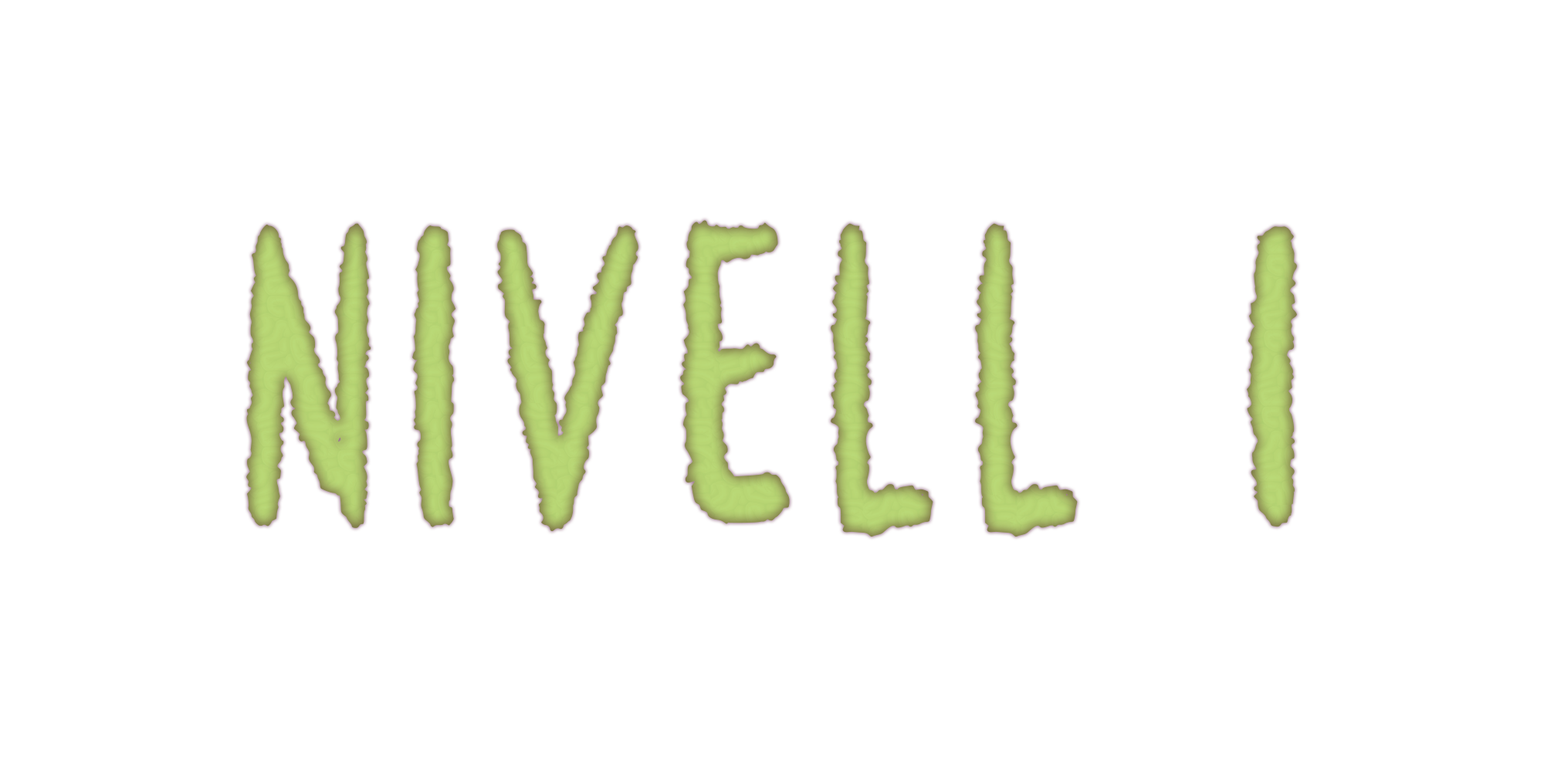
<style>
.page{position:relative;width:1544px;height:772px;background:#ffffff}
.page>*{position:absolute;margin:0}
.t1{font:321.7px "Metalien";letter-spacing:0.1em;color:#b7d974}
</style>
<div class="page">
<p class="t1" style="left:246px;top:220px;width:1051px;height:317px">Nivell 1</p>
</div>
